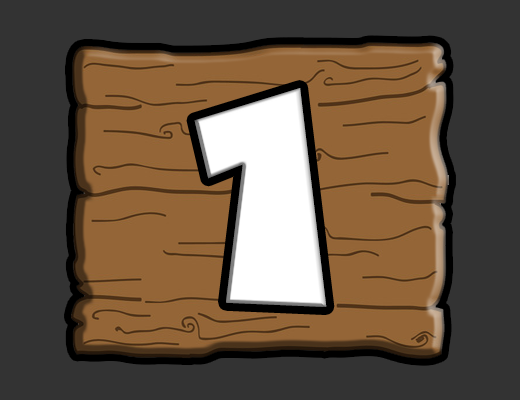
<style>
.page{position:relative;width:520px;height:400px;background:#333333}
.page>*{position:absolute;margin:0}
.t1{font:300px "Funhouse";color:#ffffff}
</style>
<div class="page">
<p class="t1" style="left:194px;top:88px;width:133px;height:219px">1</p>
</div>
